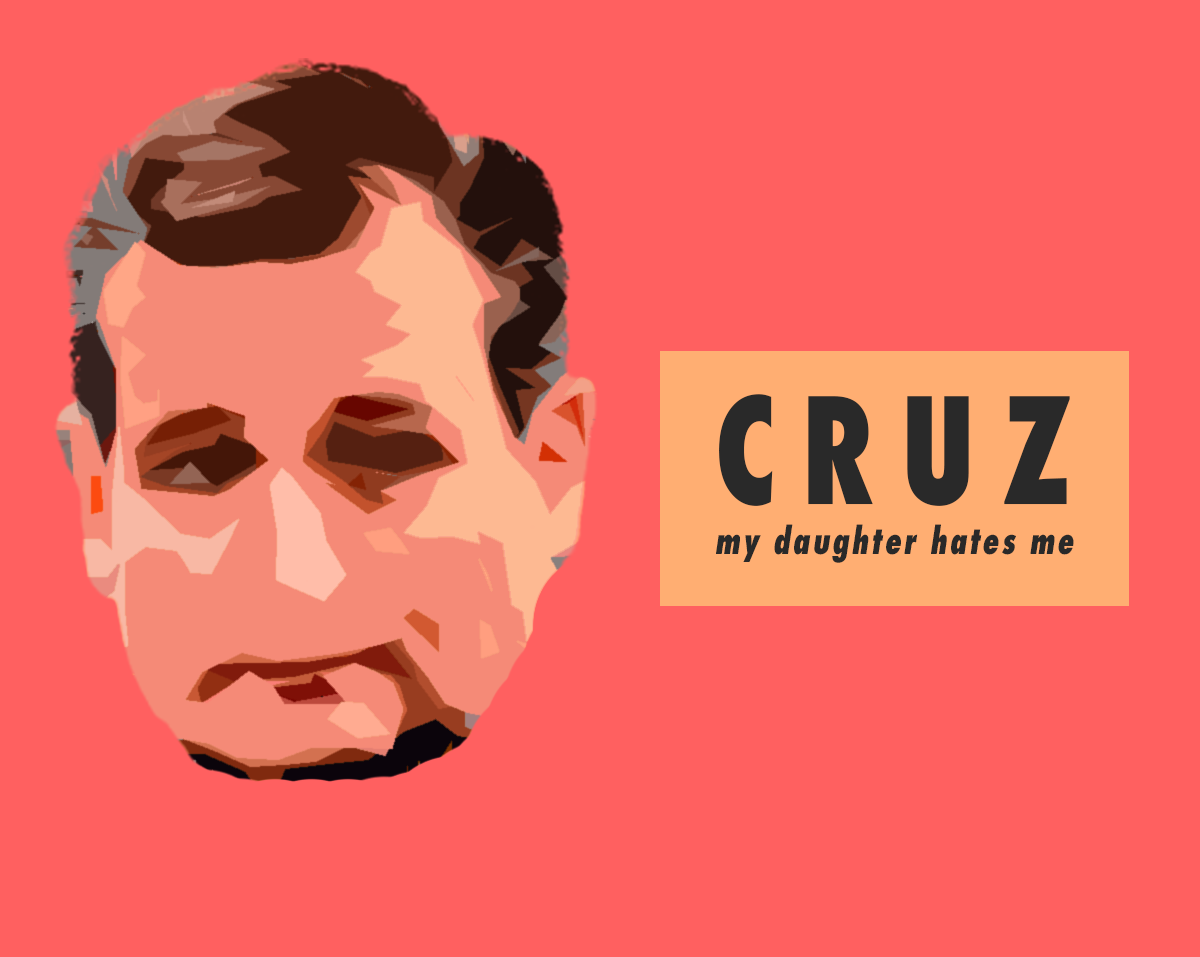
<style>
.page{position:relative;width:1200px;height:957px;background:#ff6060}
.page>*{position:absolute;margin:0}
.t1{font:35.7px/50px "Futura-CondensedExtraBold";letter-spacing:0.094em;color:#292929;font-style:italic;scale:0.84 1}
.t2{font:142.8px/50px "Futura-CondensedExtraBold";letter-spacing:0.225em;color:#292929;scale:0.84 1}
</style>
<div class="page">
<p class="t1" style="left:716px;top:394px;width:358px;height:169px"><span class="t2">CRUZ<br></span>my daughter hates me</p>
</div>
